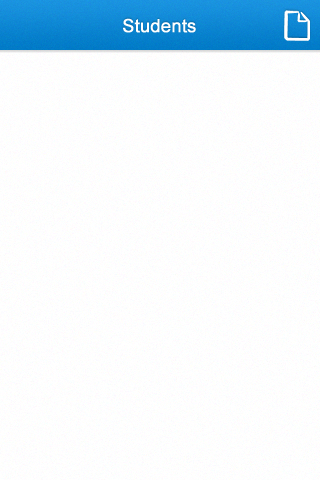
<style>
.page{position:relative;width:320px;height:480px}
.page>*{position:absolute;margin:0}
.t1{font:18px "ArialMT";letter-spacing:0.025em;color:#ffffff;font-weight:bold}
</style>
<div class="page">
<p class="t1" style="left:123px;top:18px;width:73px;height:15px">Students</p>
</div>
